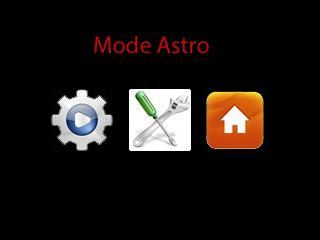
<style>
.page{position:relative;width:320px;height:240px;background:#000000}
.page>*{position:absolute;margin:0}
.t1{font:24px "MyriadPro-Regular";color:#ca0606}
</style>
<div class="page">
<p class="t1" style="left:94px;top:36px;width:115px;height:18px">Mode Astro</p>
</div>
